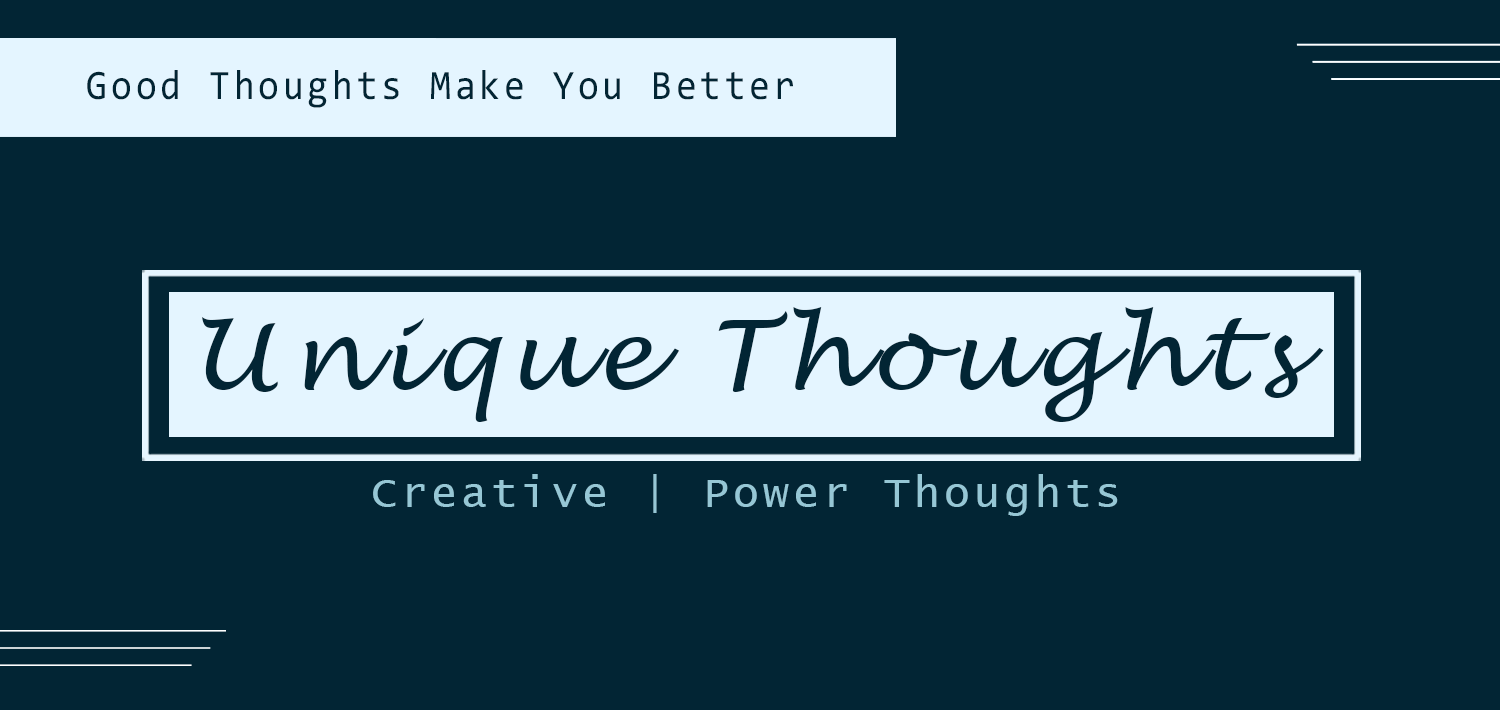
<style>
.page{position:relative;width:1500px;height:710px;background:#022534}
.page>*{position:absolute;margin:0}
.t1{font:42.1px "Consolas";letter-spacing:0.1em;color:#022534;scale:0.9 1}
.t2{font:97.1px "LucidaHandwriting-Italic";letter-spacing:0.1em;color:#022534;scale:1.03 1}
.t3{font:42.9px "LucidaConsole";letter-spacing:0.1em;color:#96c7d5}
</style>
<div class="page">
<p class="t1" style="left:87px;top:70px;width:706px;height:38px">Good Thoughts Make You Better</p>
<p class="t2" style="left:202px;top:307px;width:1122px;height:115px">Unique Thoughts</p>
<p class="t3" style="left:373px;top:474px;width:745px;height:42px">Creative | Power Thoughts</p>
</div>
